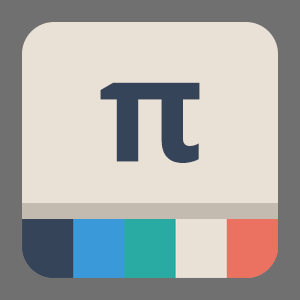
<style>
.page{position:relative;width:300px;height:300px;background:#e9e0d6}
.page>*{position:absolute;margin:0}
.t1{font:144px "OpenSans-Bold";color:#354458}
</style>
<div class="page">
<p class="t1" style="left:100px;top:82px;width:100px;height:81px">π</p>
</div>
